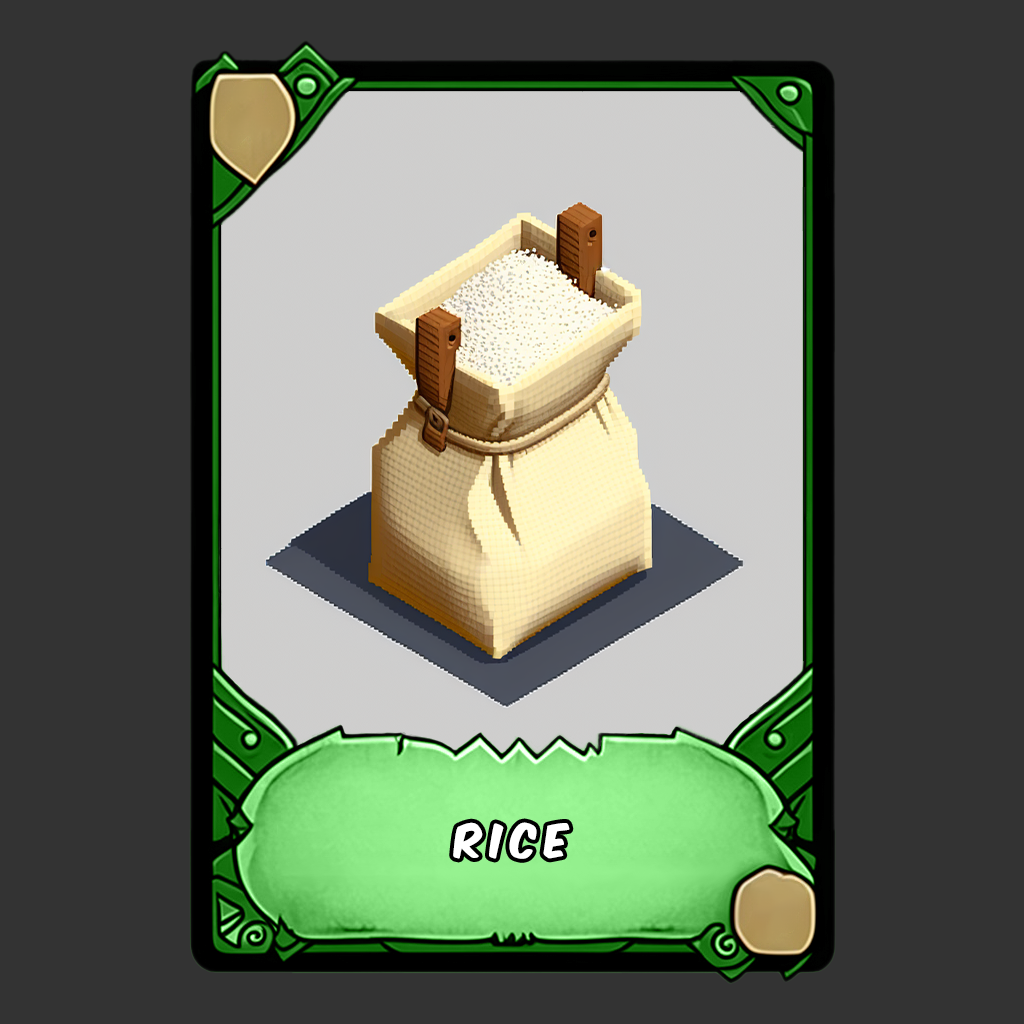
<style>
.page{position:relative;width:1024px;height:1024px;background:#333333}
.page>*{position:absolute;margin:0}
.t1{font:40px "KomikaAxis";letter-spacing:0.2em;color:#ffffff}
</style>
<div class="page">
<p class="t1" style="left:453px;top:822px;width:117px;height:37px">RICE</p>
</div>
